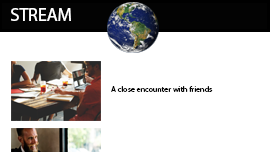
<style>
.page{position:relative;width:270px;height:152px;background:#ffffff}
.page>*{position:absolute;margin:0}
.t1{font:18px "KozGoPr6N-Regular";color:#ffffff}
.t2{font:8px "KozGoPr6N-Regular";color:#030303}
</style>
<div class="page">
<p class="t1" style="left:11px;top:8px;width:60px;height:13px">STREAM</p>
<p class="t2" style="left:111px;top:86px;width:102px;height:6px">A close encounter with friends</p>
</div>
